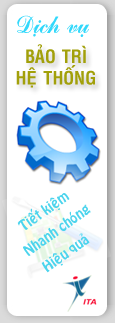
<style>
.page{position:relative;width:115px;height:323px;background:#ffffff}
.page>*{position:absolute;margin:0}
.t1{font:24px "VNI-Commerce-Bold-Italic";color:#32d8fb}
.t2{font:18px "VNI-Helve-Condense-Bold";color:#a2a00a}
.t3{font:13.3px "VNI-Hobo";color:#4cd4ed}
</style>
<div class="page">
<p class="t1" style="left:17px;top:15px;width:72px;height:22px">Dòch vuï</p>
<p class="t2" style="left:16px;top:44px;width:79px;height:44px;text-align:center">BAÛO TRÌ<br>HEÄ THOÁNG</p>
<p class="t3" style="left:17px;top:193px;width:53px;height:37px;rotate:-35deg">Tieát kieäm</p>
<p class="t3" style="left:23px;top:204px;width:68px;height:52px;rotate:-35deg">Nhanh choùng</p>
<p class="t3" style="left:41px;top:233px;width:49px;height:40px;rotate:-35deg">Hieäu quaû</p>
</div>
